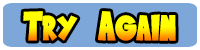
<style>
.page{position:relative;width:200px;height:50px;background:#7da7d9}
.page>*{position:absolute;margin:0}
.t1{font:41.7px "SaiyanSans"}
</style>
<div class="page">
<p class="t1" style="left:23px;top:11px;width:153px;height:30px">Try Again</p>
</div>
